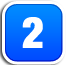
<style>
.page{position:relative;width:66px;height:65px;background:#ffffff}
.page>*{position:absolute;margin:0}
.t1{font:42px "AcmoDisplaySSiNormal";color:#ffffff}
</style>
<div class="page">
<p class="t1" style="left:22px;top:17px;width:21px;height:31px">2</p>
</div>
